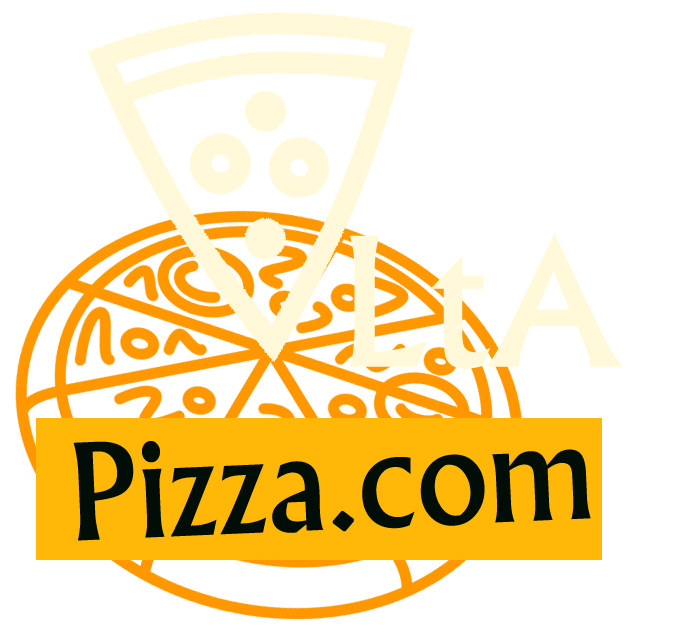
<style>
.page{position:relative;width:674px;height:629px;background:#ffffff}
.page>*{position:absolute;margin:0}
.t1{font:142px "Narkisim";color:#000e07}
</style>
<div class="page">
<p class="t1" style="left:73px;top:441px;width:518px;height:100px;rotate:-2deg">Pizza.com</p>
</div>
